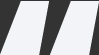
<style>
.page{position:relative;width:99px;height:55px;background:#f2f4f8}
.page>*{position:absolute;margin:0}
.t1{font:200px "Jost-Black";color:#f2f4f8}
</style>
<div class="page">
<p class="t1" style="left:0px;top:1px;width:99px;height:54px">“</p>
</div>
